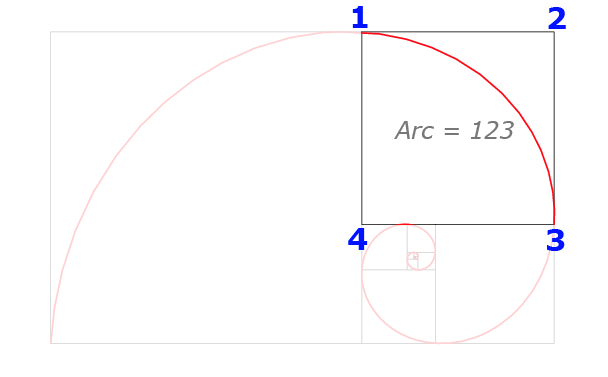
<style>
.page{position:relative;width:608px;height:377px;background:#ffffff}
.page>*{position:absolute;margin:0}
.t1{font:30px "Verdana-Bold";letter-spacing:-0.01em;color:#0012ff}
.t2{font:24px "Verdana-Italic";letter-spacing:-0.01em;color:#777777}
</style>
<div class="page">
<p class="t1" style="left:352px;top:6px;width:16px;height:22px">1</p>
<p class="t1" style="left:548px;top:7px;width:18px;height:22px">2</p>
<p class="t2" style="left:394px;top:121px;width:120px;height:18px">Arc = 123</p>
<p class="t1" style="left:348px;top:228px;width:20px;height:22px">4</p>
<p class="t1" style="left:547px;top:229px;width:18px;height:22px">3</p>
</div>
